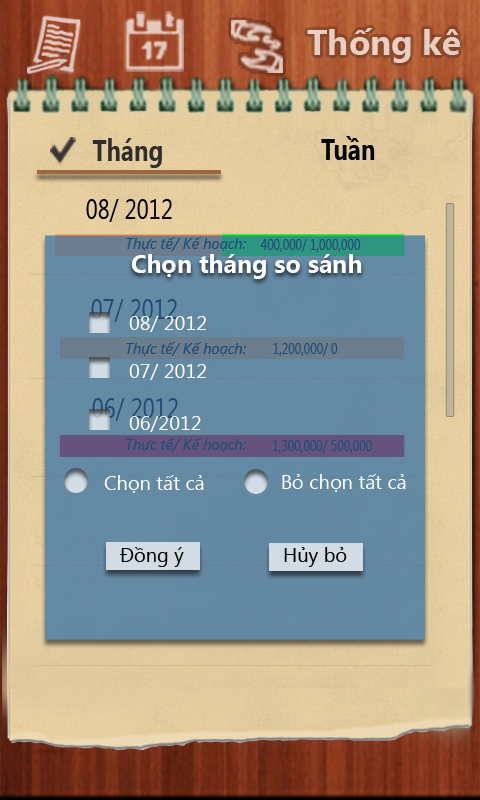
<style>
.page{position:relative;width:480px;height:800px}
.page>*{position:absolute;margin:0}
.t1{font:35px "SegoeUI-Bold";color:#e7cec2}
.t2{font:30px "SegoeUI-Bold";color:#000000;scale:0.8 1}
.t3{font:30px "SegoeUI-Bold";color:#302d2d;scale:0.8 1}
.t4{font:32.5px "SegoeUI-Bold";color:#302d2d;scale:0.8 1}
.t5{font:28px "SegoeUI";color:#000000;scale:0.8 1}
.t6{font:15px "SegoeUI-Italic";color:#204d75}
.t7{font:15px "SegoeUI";color:#204d75;scale:0.8 1}
.t8{font:25px "SegoeUI-Bold";color:#ffffff}
.t9{font:28px "SegoeUI";color:#204d75;scale:0.8 1}
.t10{font:20px "SegoeUI";color:#ffffff}
.t11{font:20px "SegoeUI";color:#000000}
</style>
<div class="page">
<p class="t1" style="left:307px;top:28px;width:153px;height:35px">Thống kê</p>
<p class="t2" style="left:321px;top:136px;width:54px;height:24px">Tuần</p>
<p class="t3" style="left:92px;top:138px;width:70px;height:30px"><span class="t4"> </span>Tháng</p>
<p class="t5" style="left:86px;top:199px;width:86px;height:23px">08/ 2012</p>
<p class="t6" style="left:126px;top:237px;width:120px;height:14px">Thực tế/ Kế hoạch:</p>
<p class="t7" style="left:260px;top:239px;width:101px;height:13px">400,000/ 1,000,000</p>
<p class="t8" style="left:131px;top:254px;width:231px;height:25px">Chọn tháng so sánh</p>
<p class="t9" style="left:91px;top:299px;width:86px;height:23px">07/ 2012</p>
<p class="t10" style="left:129px;top:316px;width:77px;height:16px">08/ 2012</p>
<p class="t6" style="left:126px;top:342px;width:120px;height:14px">Thực tế/ Kế hoạch:</p>
<p class="t7" style="left:273px;top:343px;width:65px;height:13px">1,200,000/ 0</p>
<p class="t10" style="left:129px;top:364px;width:77px;height:16px">07/ 2012</p>
<p class="t9" style="left:92px;top:398px;width:86px;height:23px">06/ 2012</p>
<p class="t10" style="left:129px;top:416px;width:72px;height:16px">06/2012</p>
<p class="t6" style="left:126px;top:438px;width:120px;height:14px">Thực tế/ Kế hoạch:</p>
<p class="t7" style="left:273px;top:440px;width:99px;height:13px">1,300,000/ 500,000</p>
<p class="t10" style="left:104px;top:475px;width:100px;height:18px">Chọn tất cả</p>
<p class="t10" style="left:282px;top:474px;width:124px;height:18px">Bỏ chọn tất cả</p>
<p class="t11" style="left:120px;top:547px;width:64px;height:20px">Đồng ý</p>
<p class="t11" style="left:284px;top:547px;width:63px;height:20px">Hủy bỏ</p>
</div>
